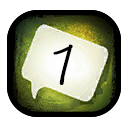
<style>
.page{position:relative;width:128px;height:128px;background:#ffffff}
.page>*{position:absolute;margin:0}
.t1{font:58.7px "InkFree";color:#000000}
</style>
<div class="page">
<p class="t1" style="left:53px;top:44px;width:20px;height:41px;rotate:19deg">1</p>
</div>
